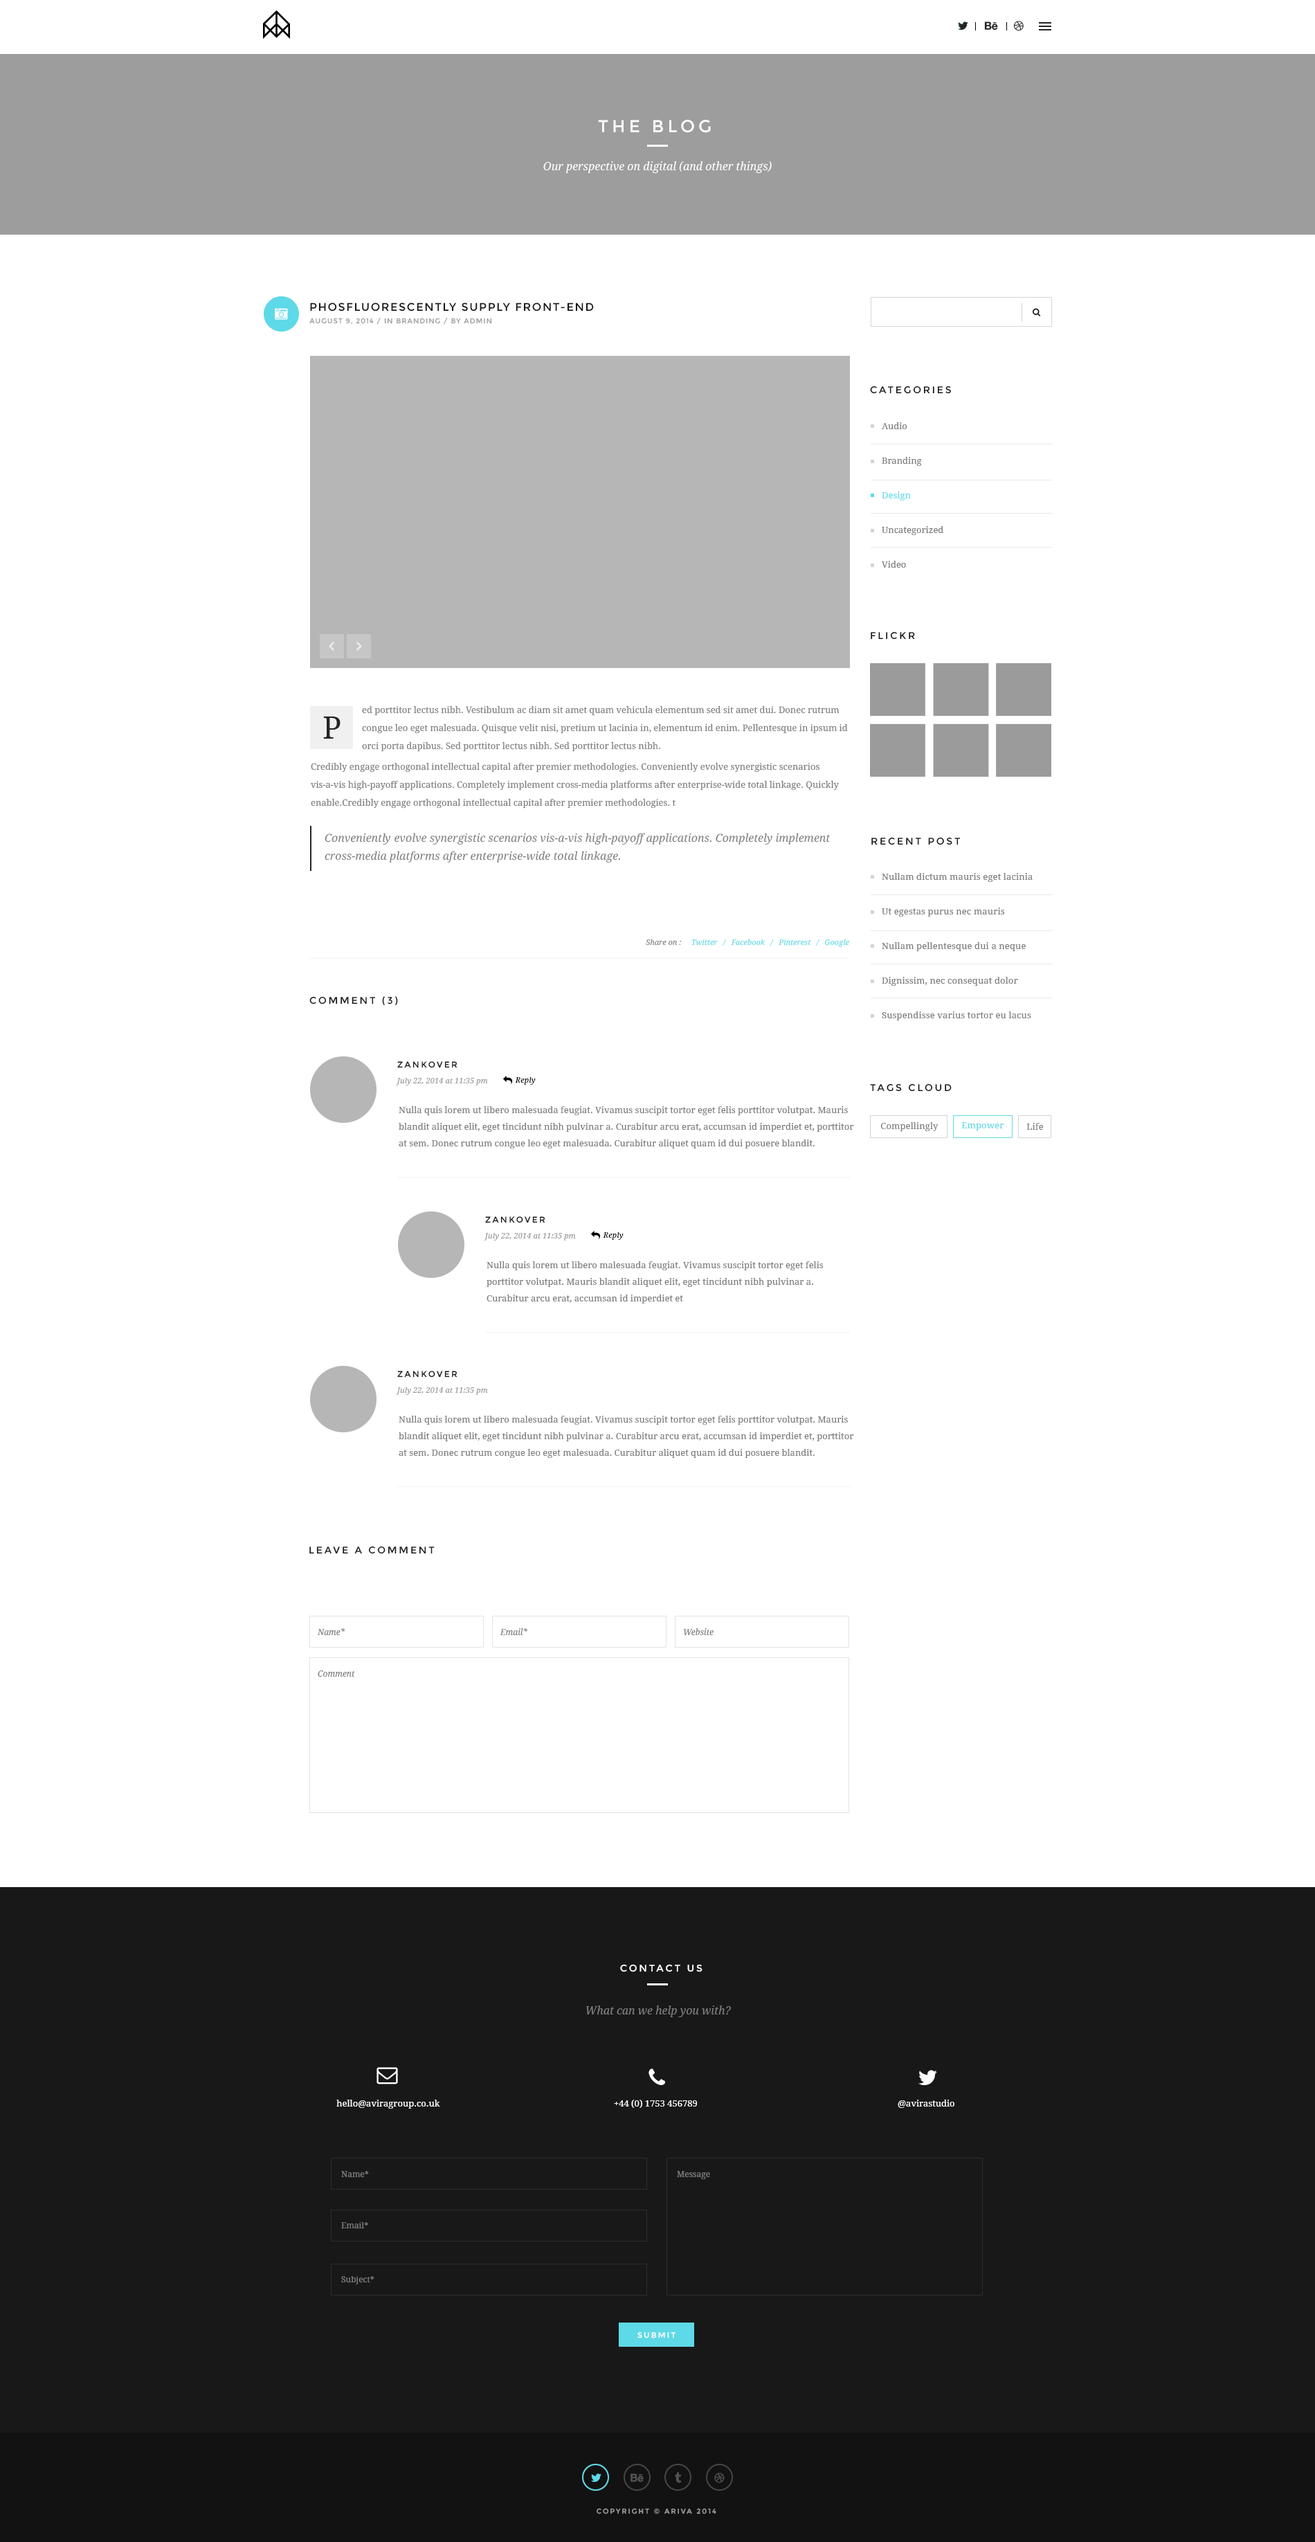
<style>
.page{position:relative;width:1315px;height:2542px;background:#ffffff}
.page>*{position:absolute;margin:0}
.t1{font:17.3px "Montserrat-Regular";letter-spacing:0.2em;color:#ffffff}
.t2{font:11.1px "DroidSerif-Italic";color:#ffffff}
.t3{font:11.1px "Montserrat-Regular";letter-spacing:0.1em;color:#181818;text-transform:uppercase}
.t4{font:6.9px "Montserrat-Regular";letter-spacing:0.1em;color:#9f9f9f;text-transform:uppercase}
.t5{font:9.7px "Montserrat-Regular";letter-spacing:0.2em;color:#181818;text-transform:uppercase}
.t6{font:9px/34.6px "DroidSerif";color:#7e7d7d}
.t7{font:9px/34.6px "DroidSerif";color:#5ed9e7}
.t8{font:9px/18px "DroidSerif";color:#7e7d7d}
.t9{font:31.2px "DroidSerif";letter-spacing:0.01em;color:#252525}
.t10{font:11.1px/18px "DroidSerif-Italic";color:#7e7d7d}
.t11{font:9px/34.6px "DroidSerif";letter-spacing:0.01em;color:#7e7d7d}
.t12{font:7.6px "DroidSerif-Italic";color:#5ed9e7}
.t13{font:7.6px "DroidSerif-Italic";color:#7e7d7d}
.t14{font:8.3px "Montserrat-Regular";letter-spacing:0.2em;color:#181818;text-transform:uppercase}
.t15{font:7.6px "DroidSerif-Italic";letter-spacing:0.01em;color:#979797}
.t16{font:7.6px "DroidSerif-Italic";letter-spacing:0.01em;color:#000000}
.t17{font:9px/16.6px "DroidSerif";color:#7e7d7d}
.t18{font:9px "DroidSerif";letter-spacing:0.01em;color:#7e7d7d}
.t19{font:9px "DroidSerif";letter-spacing:0.01em;color:#5ed9e7}
.t20{font:8.3px "DroidSerif-Italic";color:#7e7d7d}
.t21{font:9.7px "Montserrat-Regular";letter-spacing:0.2em;color:#ffffff;text-transform:uppercase}
.t22{font:11.1px "DroidSerif-Italic";color:#7e7d7d}
.t23{font:9px "DroidSerif";color:#ffffff}
.t24{font:8.3px "DroidSerif";color:#7e7d7d}
.t25{font:7.6px "Montserrat-Regular";letter-spacing:0.2em;color:#ffffff}
.t26{font:6.9px "Montserrat-Regular";letter-spacing:0.2em;color:#9f9f9f;text-transform:uppercase}
</style>
<div class="page">
<p class="t1" style="left:598px;top:120px;width:113px;height:13px">THE BLOG</p>
<p class="t2" style="left:543px;top:161px;width:229px;height:12px">Our perspective on digital (and other things)</p>
<p class="t3" style="left:310px;top:303px;width:284px;height:9px">Phosfluorescently supply front-end</p>
<p class="t4" style="left:309px;top:317px;width:183px;height:8px">AUGUST 9, 2014 / IN Branding / BY Admin</p>
<p class="t5" style="left:870px;top:386px;width:81px;height:8px">CATEGORIES</p>
<p class="t6" style="left:881px;top:422px;width:63px;height:146px">Audio<br>Branding<br><span class="t7">Design<br></span>Uncategorized<br>Video</p>
<p class="t5" style="left:871px;top:631px;width:44px;height:9px">FLICKR</p>
<p class="t8" style="left:362px;top:705px;width:486px;height:47px">ed porttitor lectus nibh. Vestibulum ac diam sit amet quam vehicula elementum sed sit amet dui. Donec rutrum congue leo eget malesuada. Quisque velit nisi, pretium ut lacinia in, elementum id enim. Pellentesque in ipsum id orci porta dapibus. Sed porttitor lectus nibh. Sed porttitor lectus nibh.</p>
<p class="t9" style="left:323px;top:717px;width:18px;height:22px">P</p>
<p class="t8" style="left:310px;top:762px;width:529px;height:101px">Credibly engage orthogonal intellectual capital after premier methodologies. Conveniently evolve synergistic scenarios vis-a-vis high-payoff applications. Completely implement cross-media platforms after enterprise-wide total linkage. Quickly enable.Credibly engage orthogonal intellectual capital after premier methodologies. t<br><br><span class="t10">Conveniently evolve synergistic scenarios vis-a-vis high-payoff applications. Completely implement cross-media platforms after enterprise-wide total linkage.</span></p>
<p class="t5" style="left:872px;top:837px;width:88px;height:8px">RECENT POST</p>
<p class="t11" style="left:882px;top:873px;width:151px;height:147px">Nullam dictum mauris eget lacinia <br>Ut egestas purus nec mauris <br>Nullam pellentesque dui a neque Dignissim, nec consequat dolor <br>Suspendisse varius tortor eu lacus</p>
<p class="t12" style="left:646px;top:939px;width:203px;height:8px"><span class="t13">Share on :     </span>Twitter   /   Facebook   /   Pinterest   /   Google</p>
<p class="t5" style="left:309px;top:996px;width:89px;height:9px">comment (3)</p>
<p class="t14" style="left:397px;top:1061px;width:61px;height:7px">zankover</p>
<p class="t15" style="left:396px;top:1078px;width:92px;height:8px">July 22, 2014 at 11:35 pm</p>
<p class="t16" style="left:515px;top:1077px;width:21px;height:8px">Reply</p>
<p class="t5" style="left:870px;top:1083px;width:82px;height:9px">TAGS CLOUD</p>
<p class="t17" style="left:399px;top:1106px;width:455px;height:43px">Nulla quis lorem ut libero malesuada feugiat. Vivamus suscipit tortor eget felis porttitor volutpat. Mauris blandit aliquet elit, eget tincidunt nibh pulvinar a. Curabitur arcu erat, accumsan id imperdiet et, porttitor at sem. Donec rutrum congue leo eget malesuada. Curabitur aliquet quam id dui posuere blandit.</p>
<p class="t18" style="left:881px;top:1122px;width:58px;height:9px">Compellingly</p>
<p class="t19" style="left:962px;top:1122px;width:43px;height:9px">Empower</p>
<p class="t18" style="left:1027px;top:1123px;width:17px;height:7px">Life</p>
<p class="t14" style="left:485px;top:1216px;width:61px;height:7px">zankover</p>
<p class="t15" style="left:484px;top:1233px;width:92px;height:8px">July 22, 2014 at 11:35 pm</p>
<p class="t16" style="left:603px;top:1232px;width:21px;height:8px">Reply</p>
<p class="t17" style="left:487px;top:1261px;width:337px;height:43px">Nulla quis lorem ut libero malesuada feugiat. Vivamus suscipit tortor eget felis porttitor volutpat. Mauris blandit aliquet elit, eget tincidunt nibh pulvinar a. Curabitur arcu erat, accumsan id imperdiet et</p>
<p class="t14" style="left:397px;top:1371px;width:61px;height:7px">zankover</p>
<p class="t15" style="left:396px;top:1387px;width:92px;height:8px">July 22, 2014 at 11:35 pm</p>
<p class="t17" style="left:399px;top:1416px;width:455px;height:42px">Nulla quis lorem ut libero malesuada feugiat. Vivamus suscipit tortor eget felis porttitor volutpat. Mauris blandit aliquet elit, eget tincidunt nibh pulvinar a. Curabitur arcu erat, accumsan id imperdiet et, porttitor at sem. Donec rutrum congue leo eget malesuada. Curabitur aliquet quam id dui posuere blandit.</p>
<p class="t5" style="left:309px;top:1546px;width:126px;height:8px">Leave a comment</p>
<p class="t20" style="left:317px;top:1628px;width:28px;height:7px">Name*</p>
<p class="t20" style="left:500px;top:1628px;width:28px;height:7px">Email*</p>
<p class="t20" style="left:684px;top:1628px;width:30px;height:7px">Website</p>
<p class="t20" style="left:318px;top:1671px;width:37px;height:6px">Comment</p>
<p class="t21" style="left:620px;top:1964px;width:83px;height:8px">CONTACT US</p>
<p class="t22" style="left:586px;top:2006px;width:145px;height:11px">What can we help you with?</p>
<p class="t23" style="left:336px;top:2100px;width:104px;height:9px">hello@aviragroup.co.uk</p>
<p class="t23" style="left:614px;top:2100px;width:83px;height:8px">+44 (0) 1753 456789</p>
<p class="t23" style="left:898px;top:2100px;width:57px;height:8px">@avirastudio</p>
<p class="t24" style="left:341px;top:2171px;width:28px;height:6px">Name*</p>
<p class="t24" style="left:677px;top:2171px;width:33px;height:8px">Message</p>
<p class="t24" style="left:341px;top:2222px;width:27px;height:7px">Email*</p>
<p class="t24" style="left:341px;top:2276px;width:34px;height:9px">Subject*</p>
<p class="t25" style="left:638px;top:2332px;width:38px;height:7px">SUBMIT</p>
<p class="t26" style="left:597px;top:2508px;width:120px;height:6px">COPYRIGHT © ARIVA 2014</p>
</div>
